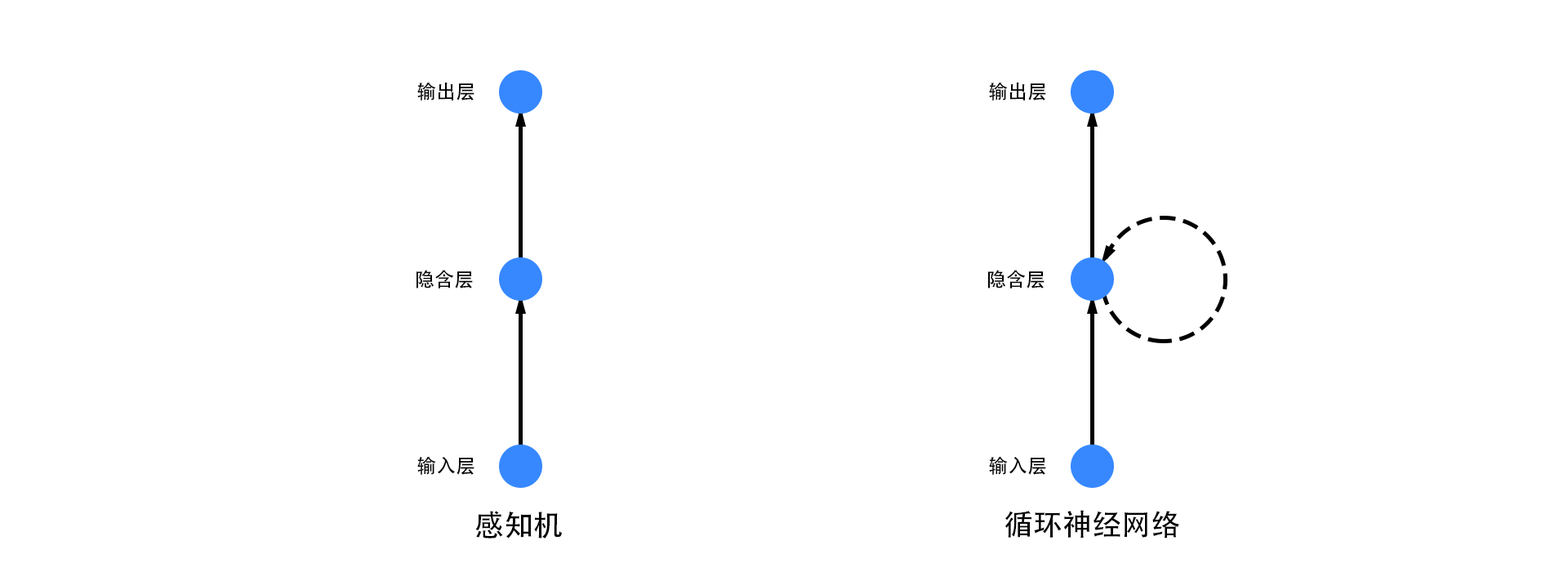
<style>
.page{position:relative;width:1568px;height:572px;background:#ffffff}
.page>*{position:absolute;margin:0}
.t1{font:19.6px "AdobeHeitiStd-Regular";color:#000000}
.t2{font:29.4px "AdobeHeitiStd-Regular";color:#000000}
</style>
<div class="page">
<p class="t1" style="left:417px;top:82px;width:57px;height:18px">输出层</p>
<p class="t1" style="left:989px;top:82px;width:57px;height:18px">输出层</p>
<p class="t1" style="left:416px;top:270px;width:57px;height:18px">隐含层</p>
<p class="t1" style="left:987px;top:270px;width:58px;height:18px">隐含层</p>
<p class="t1" style="left:417px;top:456px;width:57px;height:18px">输入层</p>
<p class="t1" style="left:989px;top:456px;width:57px;height:18px">输入层</p>
<p class="t2" style="left:1004px;top:510px;width:175px;height:28px">循环神经网络</p>
<p class="t2" style="left:475px;top:510px;width:87px;height:28px">感知机</p>
</div>
